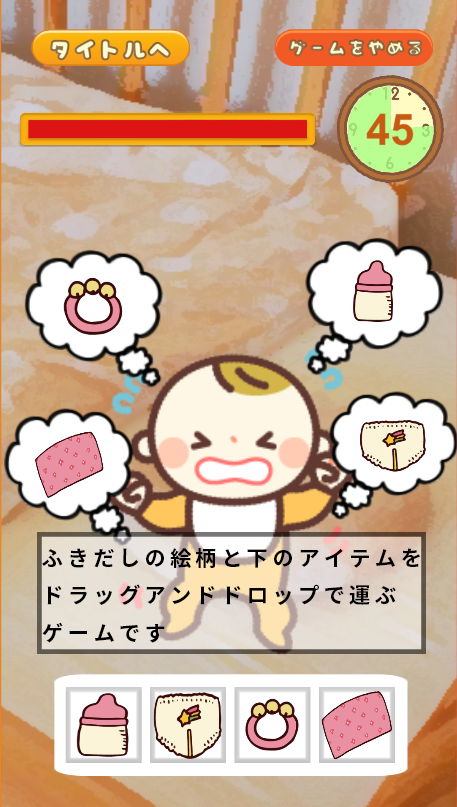
<style>
.page{position:relative;width:457px;height:807px}
.page>*{position:absolute;margin:0}
.t1{font:21.3px "SourceHanSansJP-Bold";letter-spacing:0.2em;color:#000000}
</style>
<div class="page">
<p class="t1" style="left:42px;top:548px;width:378px;height:95px">ふきだしの絵柄と下のアイテムを<br>ドラッグアンドドロップで運ぶ<br>ゲームです</p>
</div>
